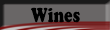
<style>
.page{position:relative;width:110px;height:30px;background:#696666}
.page>*{position:absolute;margin:0}
.t1{font:20px "CooperBlackStd";color:#000000;scale:0.75 1}
</style>
<div class="page">
<p class="t1" style="left:31px;top:7px;width:49px;height:16px">Wines</p>
</div>
